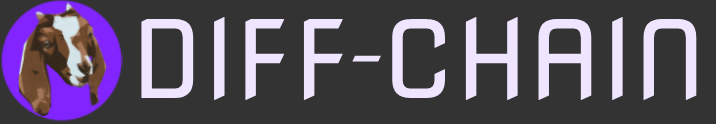
<style>
.page{position:relative;width:716px;height:124px;background:#333333}
.page>*{position:absolute;margin:0}
.t1{font:107px "NovaSquare";color:#f0e5ff}
.t2{font:63.3px "NovaSquare";color:#f0e5ff}
</style>
<div class="page">
<p class="t1" style="left:141px;top:17px;width:202px;height:84px">DIFF</p>
<p class="t1" style="left:392px;top:17px;width:305px;height:84px">CHAIN</p>
<p class="t2" style="left:352px;top:55px;width:29px;height:7px">-</p>
</div>
